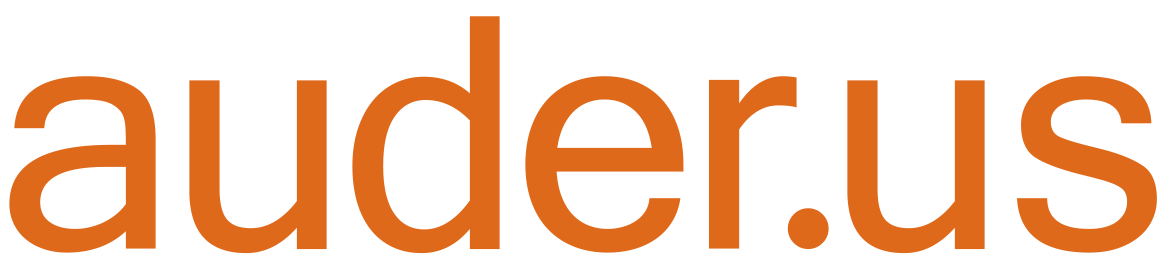
<style>
.page{position:relative;width:1170px;height:268px;background:#ffffff}
.page>*{position:absolute;margin:0}
.t1{font:416.7px "Tunga";color:#df691a}
</style>
<div class="page">
<p class="t1" style="left:9px;top:16px;width:788px;height:238px">auder</p>
<p class="t1" style="left:847px;top:76px;width:310px;height:178px">us</p>
<p class="t1" style="left:787px;top:208px;width:42px;height:41px">.</p>
</div>
